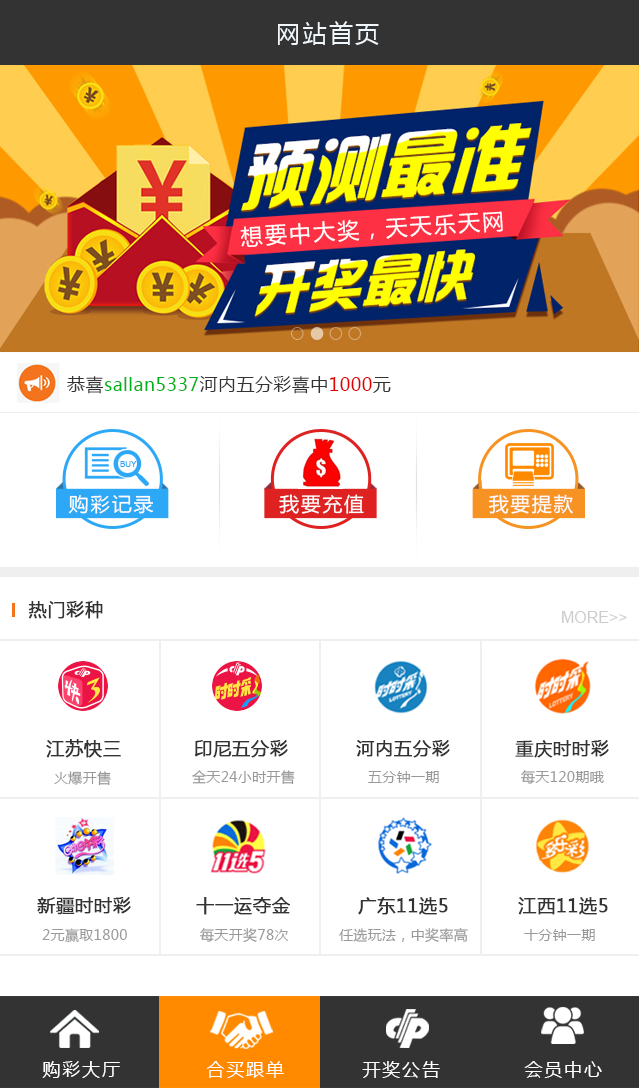
<style>
.page{position:relative;width:639px;height:1088px;background:#ffffff}
.page>*{position:absolute;margin:0}
.t1{font:24px "MicrosoftYaHei";letter-spacing:0.1em;color:#f0f7fc}
.t2{font:22px "MicrosoftYaHei";letter-spacing:0.1em;color:#ffffff}
.t3{font:18px "MicrosoftYaHei";letter-spacing:0.025em;color:#03b118}
.t4{font:18px "MicrosoftYaHei";letter-spacing:0.025em;color:#333333}
.t5{font:18px "MicrosoftYaHei";letter-spacing:0.025em;color:#e10000}
.t6{font:8px "ArialMT";color:#2ca8f6;text-transform:uppercase}
.t7{font:19.6px "MicrosoftYaHei";letter-spacing:0.1em;color:#fefefe}
.t8{font:18px "MicrosoftYaHei";letter-spacing:0.025em;color:#333333;font-weight:bold}
.t9{font:16px "ArialMT";color:#cccccc;text-transform:uppercase}
.t10{font:14px "MicrosoftYaHei";letter-spacing:0.025em;color:#999999}
.t11{font:18px "MicrosoftYaHei";letter-spacing:0.1em;color:#ffffff}
</style>
<div class="page">
<p class="t1" style="left:278px;top:21px;width:101px;height:24px">网站首页</p>
<p class="t2" style="left:240px;top:211px;width:263px;height:37px">想要中大奖，天天乐天网</p>
<p class="t3" style="left:67px;top:376px;width:324px;height:18px"><span class="t4">恭喜</span>sallan5337<span class="t4">河内五分彩喜中</span><span class="t5">1000</span><span class="t4">元</span></p>
<p class="t6" style="left:120px;top:461px;width:17px;height:6px">buy</p>
<p class="t7" style="left:68px;top:495px;width:86px;height:19px">购彩记录</p>
<p class="t7" style="left:279px;top:494px;width:85px;height:20px">我要充值</p>
<p class="t7" style="left:488px;top:494px;width:85px;height:20px">我要提款</p>
<p class="t8" style="left:28px;top:601px;width:75px;height:18px">热门彩种</p>
<p class="t9" style="left:562px;top:611px;width:65px;height:12px">more&gt;&gt;</p>
<p class="t8" style="left:46px;top:739px;width:75px;height:19px">江苏快三</p>
<p class="t8" style="left:194px;top:740px;width:94px;height:18px">印尼五分彩</p>
<p class="t8" style="left:356px;top:740px;width:94px;height:18px">河内五分彩</p>
<p class="t8" style="left:515px;top:740px;width:94px;height:18px">重庆时时彩</p>
<p class="t10" style="left:54px;top:771px;width:57px;height:15px">火爆开售</p>
<p class="t10" style="left:192px;top:770px;width:103px;height:15px">全天24小时开售</p>
<p class="t10" style="left:368px;top:771px;width:71px;height:12px">五分钟一期</p>
<p class="t10" style="left:521px;top:770px;width:83px;height:14px">每天120期哦</p>
<p class="t8" style="left:37px;top:897px;width:94px;height:18px">新疆时时彩</p>
<p class="t8" style="left:196px;top:897px;width:94px;height:18px">十一运夺金</p>
<p class="t8" style="left:358px;top:897px;width:90px;height:18px">广东11选5</p>
<p class="t8" style="left:518px;top:897px;width:90px;height:18px">江西11选5</p>
<p class="t10" style="left:42px;top:928px;width:85px;height:15px">2元赢取1800</p>
<p class="t10" style="left:200px;top:928px;width:89px;height:15px">每天开奖78次</p>
<p class="t10" style="left:339px;top:928px;width:129px;height:15px">任选玩法，中奖率高</p>
<p class="t10" style="left:524px;top:929px;width:71px;height:12px">十分钟一期</p>
<p class="t11" style="left:42px;top:1061px;width:78px;height:17px">购彩大厅</p>
<p class="t11" style="left:206px;top:1061px;width:78px;height:17px">合买跟单</p>
<p class="t11" style="left:362px;top:1061px;width:78px;height:17px">开奖公告</p>
<p class="t11" style="left:524px;top:1061px;width:78px;height:17px">会员中心</p>
</div>
